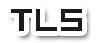
<style>
.page{position:relative;width:98px;height:43px;background:#ffffff}
.page>*{position:absolute;margin:0}
.t1{font:42.7px "VisitorTT1BRK";color:#1b1b1b}
</style>
<div class="page">
<p class="t1" style="left:11px;top:9px;width:71px;height:22px">TLS</p>
</div>
